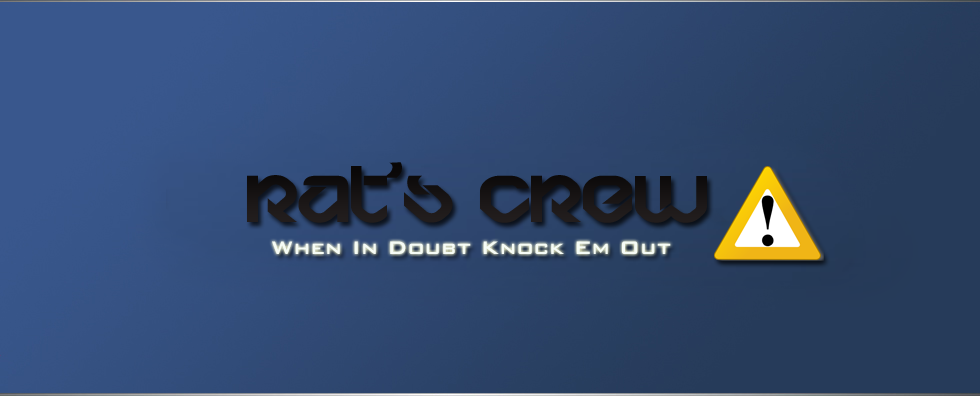
<style>
.page{position:relative;width:980px;height:396px}
.page>*{position:absolute;margin:0}
.t1{font:72px "BDBardust";color:#181515;scale:1.17 1}
.t2{font:24px "BankGothicBT-Medium";color:#f6fcf6}
</style>
<div class="page">
<p class="t1" style="left:247px;top:162px;width:460px;height:61px">RAT's Crew</p>
<p class="t2" style="left:272px;top:241px;width:399px;height:13px">When In Doubt Knock Em Out</p>
</div>
